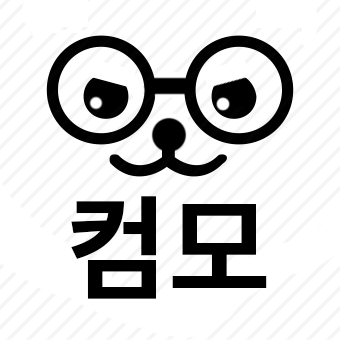
<style>
.page{position:relative;width:340px;height:340px;background:#ffffff}
.page>*{position:absolute;margin:0}
.t1{font:112px "NotoSansKR-Bold";color:#000000}
</style>
<div class="page">
<p class="t1" style="left:71px;top:196px;width:196px;height:103px">컴모</p>
</div>
